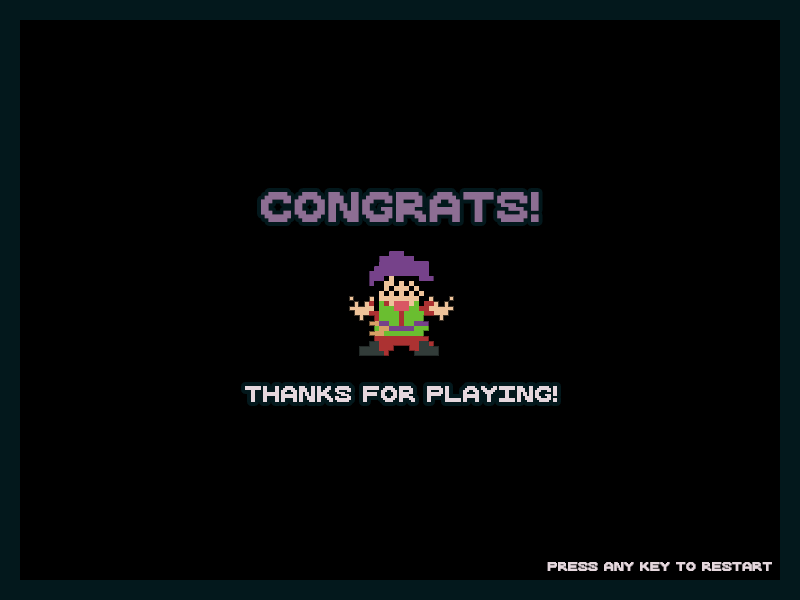
<style>
.page{position:relative;width:800px;height:600px;background:#000000}
.page>*{position:absolute;margin:0}
.t1{font:60px "CubeCavern-Regular";color:#8d6e93}
.t2{font:32px "CubeCavern-Regular";color:#e5d7dd}
.t3{font:18px "CubeCavern-Regular";color:#e5d7dd}
</style>
<div class="page">
<p class="t1" style="left:261px;top:192px;width:278px;height:30px">CONGRATS!</p>
<p class="t2" style="left:245px;top:386px;width:312px;height:16px">THANKS FOR PLAYING!</p>
<p class="t3" style="left:547px;top:562px;width:225px;height:9px">PRESS ANY KEY TO RESTART</p>
</div>
